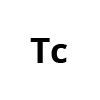
<style>
.page{position:relative;width:100px;height:100px;background:#ffffff}
.page>*{position:absolute;margin:0}
.t1{font:35px "OpenSans-Bold";color:#000000}
</style>
<div class="page">
<p class="t1" style="left:30px;top:38px;width:37px;height:25px">Tc</p>
</div>
